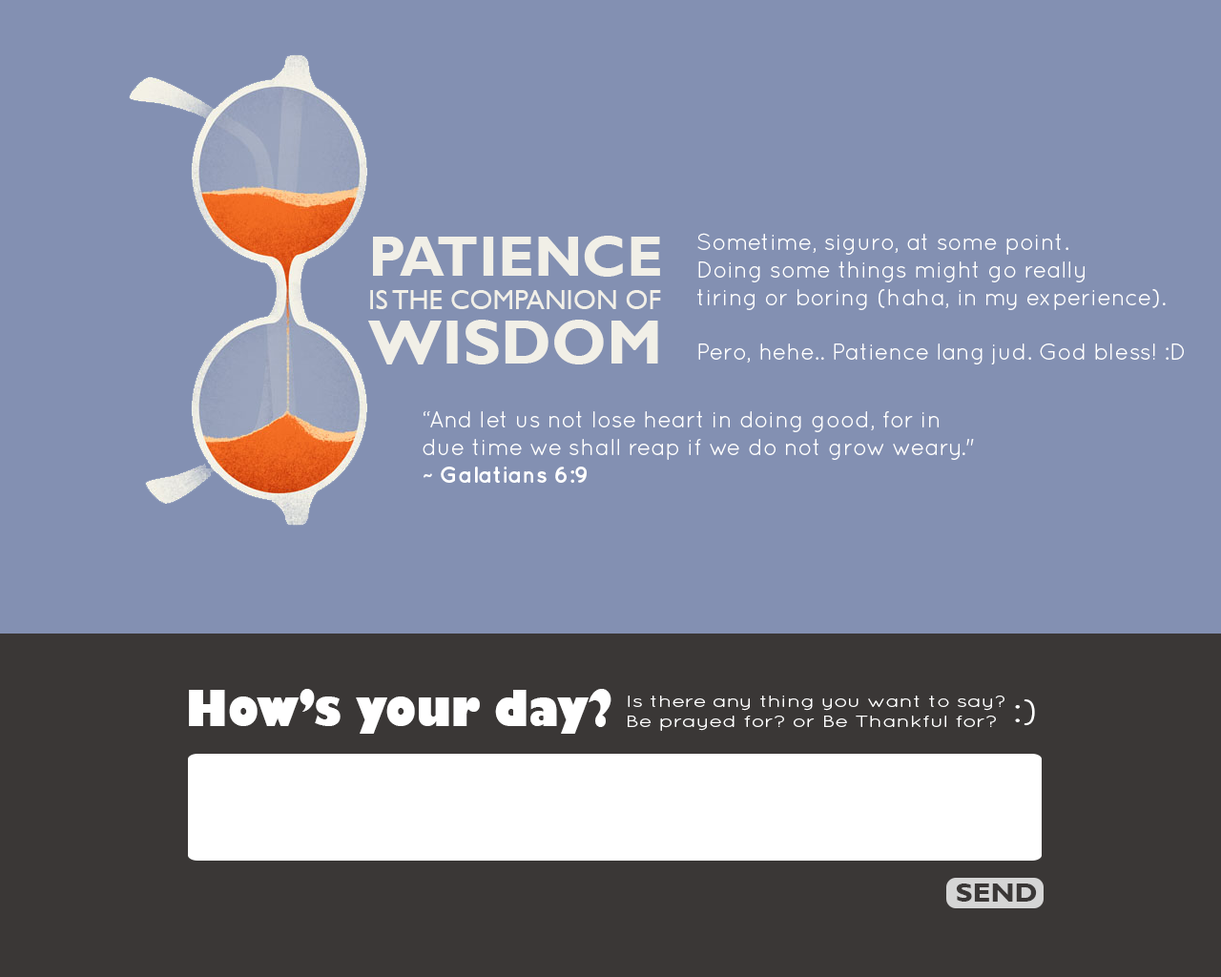
<style>
.page{position:relative;width:1221px;height:977px;background:#8390b2}
.page>*{position:absolute;margin:0}
.t1{font:22.9px "Quicksand-Regular";color:#ffffff}
.t2{font:27.7px "GillSansMT";color:#f1efe7}
.t3{font:57.2px "GillSansMT-Bold";color:#f1efe7}
.t4{font:63px/54.4px "GillSansMT-Bold";color:#f1efe7}
.t5{font:22.9px "Quicksand-Bold";color:#ffffff}
.t6{font:48.9px "GillSans-UltraBold";color:#ffffff;scale:0.88 1}
.t7{font:16.7px "Quicksand-Regular";color:#ffffff;scale:1.31 1}
.t8{font:32.5px "Quicksand-Regular";color:#ffffff;scale:1.26 1}
.t9{font:26.7px "GillSansMT-Bold";color:#3a3736;scale:1.07 1}
</style>
<div class="page">
<p class="t1" style="left:697px;top:233px;width:487px;height:131px;text-align:right">Sometime, siguro, at some point. <br>Doing some things might go really<br>tiring or boring (haha, in my experience).<br><br>Pero, hehe.. Patience lang jud. God bless! :D</p>
<p class="t2" style="left:368px;top:236px;width:293px;height:128px;text-align:right"><span class="t3">PATIENCE<br></span>IS THE COMPANION OF<br><span class="t4">WISDOM</span></p>
<p class="t1" style="left:423px;top:411px;width:551px;height:72px;text-align:right">“And let us not lose heart in doing good, for in due time we shall reap if we do not grow weary." <span class="t5">~ Galatians 6:9</span></p>
<p class="t6" style="left:189px;top:689px;width:422px;height:44px">How’s your day?</p>
<p class="t7" style="left:628px;top:695px;width:376px;height:36px;text-align:right">Is there any thing you want to say?<br>Be prayed for? or Be Thankful for?</p>
<p class="t8" style="left:1015px;top:699px;width:20px;height:27px">:)</p>
<p class="t9" style="left:956px;top:883px;width:81px;height:18px">SEND</p>
</div>
